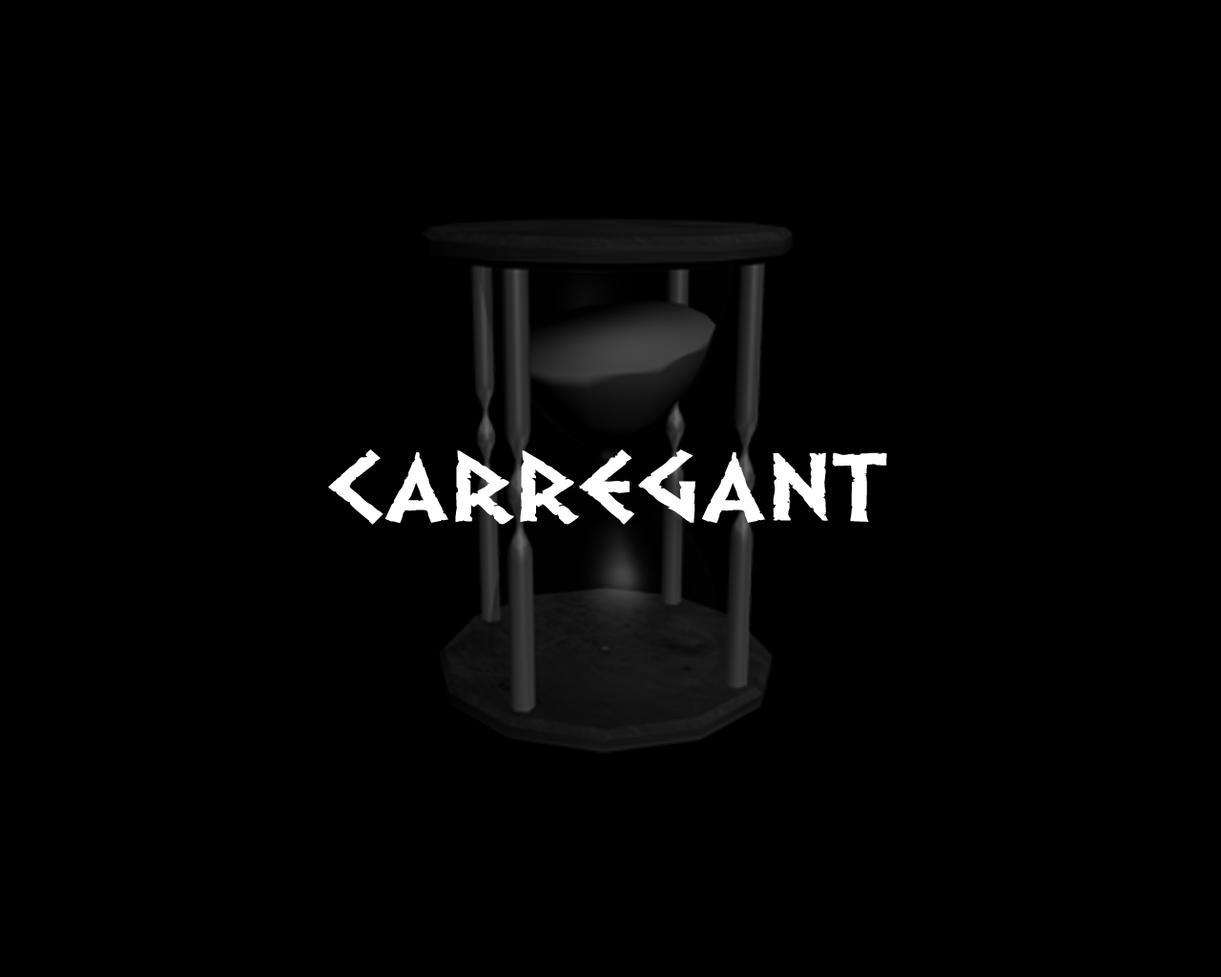
<style>
.page{position:relative;width:1221px;height:977px;background:#000000}
.page>*{position:absolute;margin:0}
.t1{font:94.5px "Dalek";letter-spacing:-0.01em;color:#ffffff;scale:1.29 1}
</style>
<div class="page">
<p class="t1" style="left:328px;top:449px;width:559px;height:76px">carregant</p>
</div>
